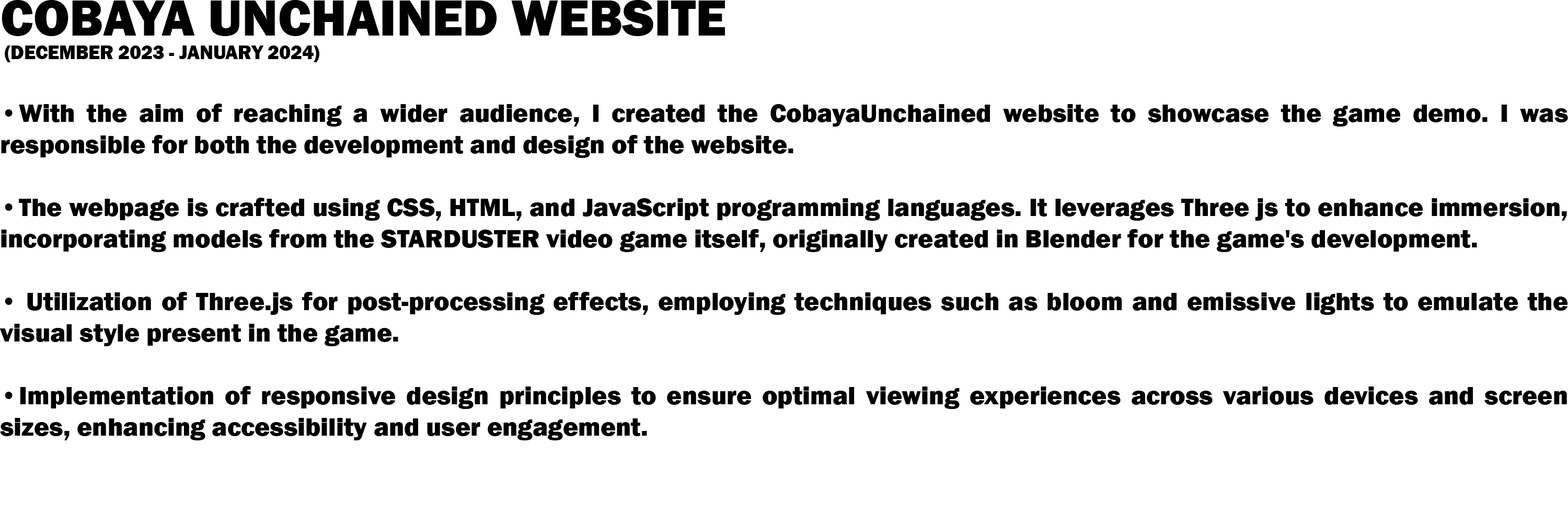
<style>
.page{position:relative;width:1568px;height:523px;background:#ffffff}
.page>*{position:absolute;margin:0}
.t1{font:26.1px "FranklinGothic-Heavy";color:#000000}
.t2{font:52.3px "FranklinGothic-Heavy";color:#000000}
.t3{font:19.6px "FranklinGothic-Heavy";color:#000000}
</style>
<div class="page">
<p class="t1" style="left:0px;top:0px;width:1568px;height:440px"><span class="t2">COBAYA UNCHAINED WEBSITE<br></span><span class="t3"> (DECEMBER 2023 - JANUARY 2024)<br></span><br>• With the aim of reaching a wider audience, I created the CobayaUnchained website to showcase the game demo. I was responsible for both the development and design of the website.<br><br>• The webpage is crafted using CSS, HTML, and JavaScript programming languages. It leverages Three js to enhance immersion, incorporating models from the STARDUSTER video game itself, originally created in Blender for the game's development.<br><br>• Utilization of Three.js for post-processing effects, employing techniques such as bloom and emissive lights to emulate the visual style present in the game.<br><br>• Implementation of responsive design principles to ensure optimal viewing experiences across various devices and screen sizes, enhancing accessibility and user engagement.</p>
</div>
